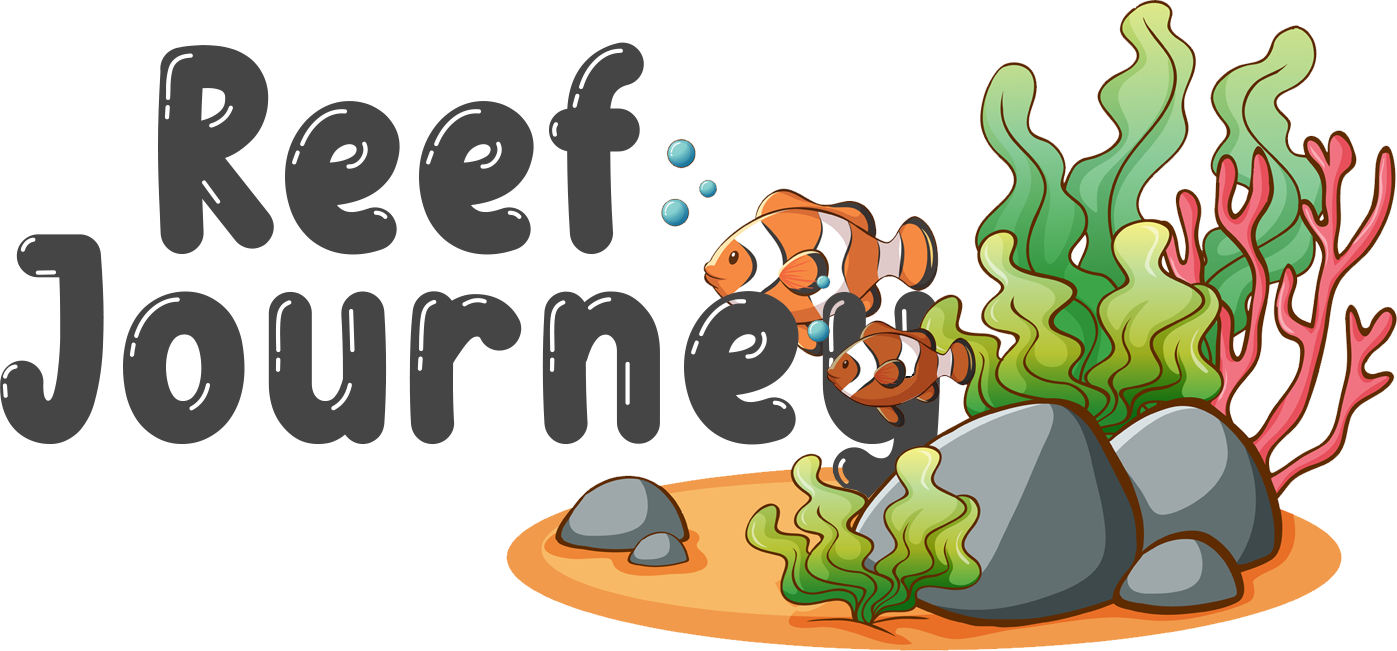
<style>
.page{position:relative;width:1397px;height:651px;background:#ffffff}
.page>*{position:absolute;margin:0}
.t1{font:300px "BubbleBobble";color:#454545}
</style>
<div class="page">
<p class="t1" style="left:158px;top:42px;width:486px;height:213px">Reef</p>
<p class="t1" style="left:0px;top:234px;width:940px;height:268px">Journey</p>
</div>
